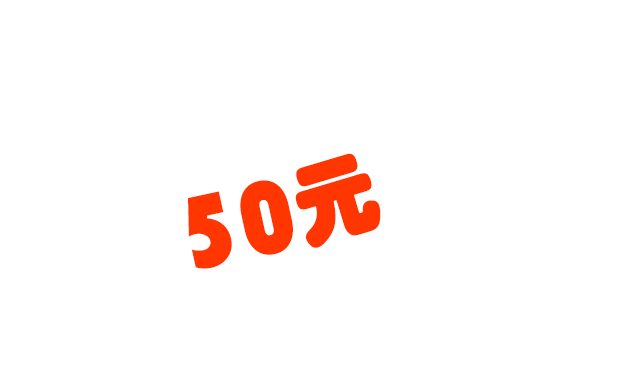
<style>
.page{position:relative;width:640px;height:375px;background:#ffffff}
.page>*{position:absolute;margin:0}
.t1{font:91px "STHupo";color:#fe4e00;font-weight:bold;scale:0.94 1}
.t2{font:91px "FZCTHJW--GB1-0";color:#fddd05;scale:0.94 1}
.t3{font:106.8px "STHupo";color:#fe4e00;font-weight:bold;scale:0.94 1}
.t4{font:106.8px "FZCTHJW--GB1-0";color:#fddd05;scale:0.94 1}
</style>
<div class="page">
<p class="t1" style="left:295px;top:153px;width:86px;height:95px;rotate:-17deg"><span class="t2"> </span>元</p>
<p class="t3" style="left:188px;top:180px;width:105px;height:89px;rotate:-12deg"><span class="t4"> </span>50</p>
</div>
